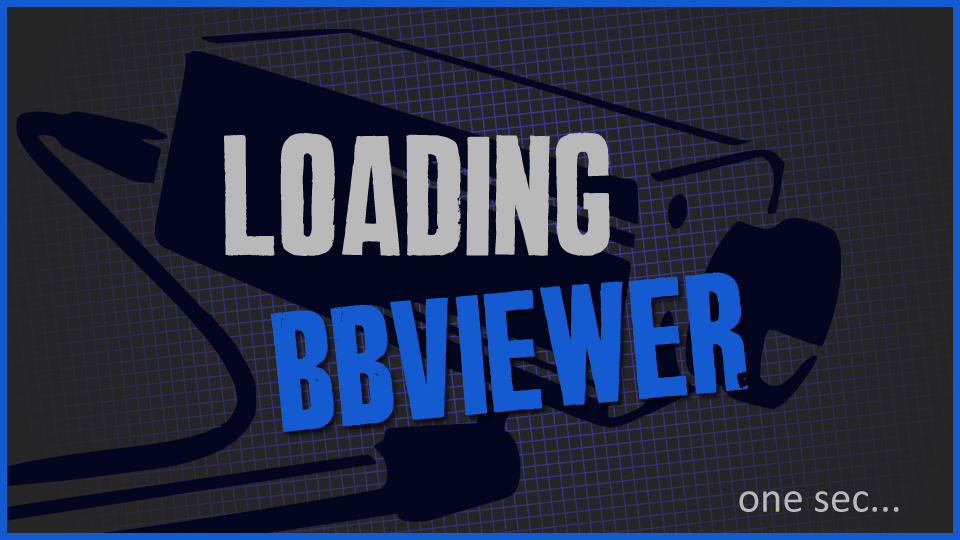
<style>
.page{position:relative;width:960px;height:540px;background:#252525}
.page>*{position:absolute;margin:0}
.t1{font:170.7px "BigBrother";color:#b9b9b9}
.t2{font:170.7px "BigBrother";color:#145bd2}
.t3{font:42.7px "Calibri";color:#b9b9b9}
</style>
<div class="page">
<p class="t1" style="left:224px;top:132px;width:386px;height:124px">loading</p>
<p class="t2" style="left:270px;top:272px;width:478px;height:160px;rotate:-5deg">BBViewer</p>
<p class="t3" style="left:739px;top:491px;width:160px;height:21px">one sec...</p>
</div>
